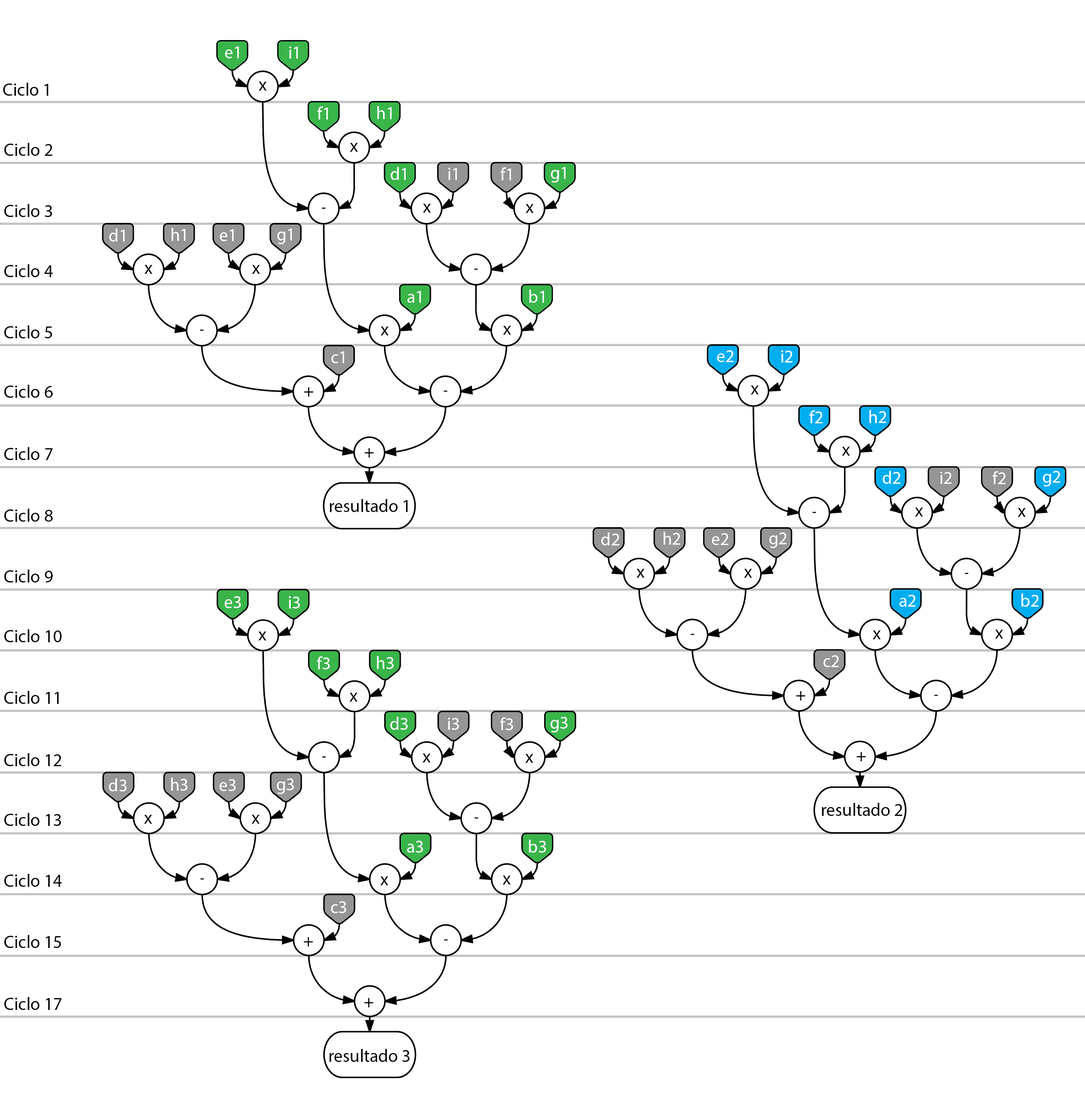
<style>
.page{position:relative;width:1085px;height:1099px;background:#ffffff}
.page>*{position:absolute;margin:0}
.t1{font:17.8px "MyriadPro-Regular";color:#ffffff}
.t2{font:17.8px "MyriadPro-Regular";color:#000000}
</style>
<div class="page">
<p class="t1" style="left:225px;top:46px;width:14px;height:12px">e1</p>
<p class="t1" style="left:289px;top:46px;width:9px;height:13px">i1</p>
<p class="t2" style="left:3px;top:83px;width:45px;height:13px">Ciclo 1</p>
<p class="t2" style="left:259px;top:82px;width:8px;height:9px">x</p>
<p class="t1" style="left:317px;top:106px;width:11px;height:13px">f1</p>
<p class="t1" style="left:377px;top:106px;width:15px;height:13px">h1</p>
<p class="t2" style="left:4px;top:143px;width:48px;height:13px">Ciclo 2</p>
<p class="t2" style="left:350px;top:143px;width:8px;height:9px">x</p>
<p class="t1" style="left:391px;top:167px;width:15px;height:13px">d1</p>
<p class="t1" style="left:448px;top:168px;width:9px;height:12px">i1</p>
<p class="t1" style="left:500px;top:167px;width:11px;height:13px">f1</p>
<p class="t1" style="left:551px;top:167px;width:15px;height:15px">g1</p>
<p class="t2" style="left:4px;top:204px;width:48px;height:13px">Ciclo 3</p>
<p class="t2" style="left:423px;top:204px;width:8px;height:9px">x</p>
<p class="t2" style="left:526px;top:204px;width:8px;height:9px">x</p>
<p class="t1" style="left:109px;top:228px;width:16px;height:13px">d1</p>
<p class="t1" style="left:171px;top:228px;width:14px;height:13px">h1</p>
<p class="t1" style="left:220px;top:229px;width:14px;height:12px">e1</p>
<p class="t1" style="left:277px;top:228px;width:15px;height:16px">g1</p>
<p class="t2" style="left:4px;top:264px;width:49px;height:13px">Ciclo 4</p>
<p class="t2" style="left:144px;top:265px;width:8px;height:9px">x</p>
<p class="t2" style="left:252px;top:265px;width:8px;height:9px">x</p>
<p class="t1" style="left:407px;top:291px;width:14px;height:12px">a1</p>
<p class="t1" style="left:529px;top:290px;width:15px;height:13px">b1</p>
<p class="t2" style="left:4px;top:325px;width:48px;height:13px">Ciclo 5</p>
<p class="t2" style="left:381px;top:326px;width:8px;height:9px">x</p>
<p class="t2" style="left:503px;top:326px;width:8px;height:9px">x</p>
<p class="t1" style="left:331px;top:351px;width:13px;height:12px">c1</p>
<p class="t1" style="left:717px;top:350px;width:17px;height:12px">e2</p>
<p class="t1" style="left:782px;top:350px;width:11px;height:12px">i2</p>
<p class="t2" style="left:4px;top:385px;width:49px;height:13px">Ciclo 6</p>
<p class="t2" style="left:304px;top:387px;width:9px;height:10px">+</p>
<p class="t2" style="left:751px;top:385px;width:8px;height:9px">x</p>
<p class="t1" style="left:809px;top:410px;width:14px;height:13px">f2</p>
<p class="t1" style="left:869px;top:410px;width:18px;height:13px">h2</p>
<p class="t2" style="left:4px;top:447px;width:49px;height:13px">Ciclo 7</p>
<p class="t2" style="left:365px;top:448px;width:9px;height:9px">+</p>
<p class="t2" style="left:842px;top:447px;width:8px;height:8px">x</p>
<p class="t1" style="left:883px;top:471px;width:18px;height:13px">d2</p>
<p class="t1" style="left:941px;top:471px;width:11px;height:13px">i2</p>
<p class="t1" style="left:993px;top:471px;width:13px;height:13px">f2</p>
<p class="t1" style="left:1043px;top:471px;width:17px;height:15px">g2</p>
<p class="t2" style="left:4px;top:509px;width:49px;height:13px">Ciclo 8</p>
<p class="t2" style="left:330px;top:499px;width:78px;height:13px">resultado 1</p>
<p class="t2" style="left:915px;top:507px;width:8px;height:9px">x</p>
<p class="t2" style="left:1018px;top:508px;width:8px;height:9px">x</p>
<p class="t1" style="left:601px;top:532px;width:18px;height:13px">d2</p>
<p class="t1" style="left:664px;top:532px;width:16px;height:13px">h2</p>
<p class="t1" style="left:712px;top:533px;width:16px;height:12px">e2</p>
<p class="t1" style="left:769px;top:532px;width:18px;height:16px">g2</p>
<p class="t2" style="left:4px;top:569px;width:49px;height:13px">Ciclo 9</p>
<p class="t2" style="left:637px;top:569px;width:8px;height:9px">x</p>
<p class="t2" style="left:744px;top:569px;width:8px;height:9px">x</p>
<p class="t1" style="left:1022px;top:593px;width:17px;height:13px">b2</p>
<p class="t1" style="left:225px;top:596px;width:16px;height:12px">e3</p>
<p class="t1" style="left:289px;top:596px;width:11px;height:12px">i3</p>
<p class="t1" style="left:899px;top:595px;width:17px;height:11px">a2</p>
<p class="t2" style="left:4px;top:629px;width:58px;height:13px">Ciclo 10</p>
<p class="t2" style="left:995px;top:629px;width:8px;height:9px">x</p>
<p class="t2" style="left:258px;top:631px;width:8px;height:9px">x</p>
<p class="t2" style="left:873px;top:630px;width:8px;height:9px">x</p>
<p class="t1" style="left:317px;top:656px;width:13px;height:13px">f3</p>
<p class="t1" style="left:377px;top:656px;width:17px;height:13px">h3</p>
<p class="t1" style="left:823px;top:655px;width:16px;height:12px">c2</p>
<p class="t2" style="left:4px;top:691px;width:55px;height:13px">Ciclo 11</p>
<p class="t2" style="left:349px;top:693px;width:9px;height:8px">x</p>
<p class="t2" style="left:796px;top:691px;width:10px;height:9px">+</p>
<p class="t1" style="left:390px;top:717px;width:18px;height:13px">d3</p>
<p class="t1" style="left:448px;top:717px;width:11px;height:13px">i3</p>
<p class="t1" style="left:500px;top:717px;width:13px;height:13px">f3</p>
<p class="t1" style="left:550px;top:717px;width:18px;height:15px">g3</p>
<p class="t2" style="left:4px;top:753px;width:57px;height:13px">Ciclo 12</p>
<p class="t2" style="left:422px;top:753px;width:9px;height:9px">x</p>
<p class="t2" style="left:525px;top:754px;width:8px;height:9px">x</p>
<p class="t2" style="left:857px;top:751px;width:9px;height:10px">+</p>
<p class="t1" style="left:109px;top:778px;width:18px;height:13px">d3</p>
<p class="t1" style="left:171px;top:777px;width:17px;height:13px">h3</p>
<p class="t1" style="left:220px;top:779px;width:16px;height:12px">e3</p>
<p class="t1" style="left:277px;top:778px;width:17px;height:16px">g3</p>
<p class="t2" style="left:822px;top:803px;width:80px;height:13px">resultado 2</p>
<p class="t2" style="left:4px;top:813px;width:57px;height:13px">Ciclo 13</p>
<p class="t2" style="left:144px;top:815px;width:8px;height:8px">x</p>
<p class="t2" style="left:251px;top:815px;width:9px;height:8px">x</p>
<p class="t1" style="left:407px;top:841px;width:16px;height:11px">a3</p>
<p class="t1" style="left:529px;top:839px;width:17px;height:13px">b3</p>
<p class="t2" style="left:4px;top:874px;width:58px;height:13px">Ciclo 14</p>
<p class="t2" style="left:380px;top:876px;width:8px;height:9px">x</p>
<p class="t2" style="left:503px;top:875px;width:8px;height:9px">x</p>
<p class="t1" style="left:331px;top:901px;width:15px;height:12px">c3</p>
<p class="t2" style="left:4px;top:935px;width:57px;height:13px">Ciclo 15</p>
<p class="t2" style="left:304px;top:937px;width:9px;height:9px">+</p>
<p class="t2" style="left:4px;top:997px;width:58px;height:13px">Ciclo 17</p>
<p class="t2" style="left:364px;top:997px;width:10px;height:10px">+</p>
<p class="t2" style="left:329px;top:1049px;width:81px;height:13px">resultado 3</p>
</div>
